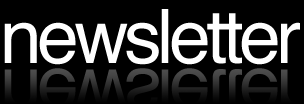
<style>
.page{position:relative;width:304px;height:104px;background:#000000}
.page>*{position:absolute;margin:0}
.t1{font:75px "Helvetica";letter-spacing:-0.06em;color:#ffffff}
.t2{font:75px "Helvetica";letter-spacing:-0.06em}
</style>
<div class="page">
<p class="t1" style="left:4px;top:9px;width:296px;height:56px">newsletter</p>
<p class="t2" style="left:4px;top:68px;width:296px;height:36px">newsletter</p>
</div>
